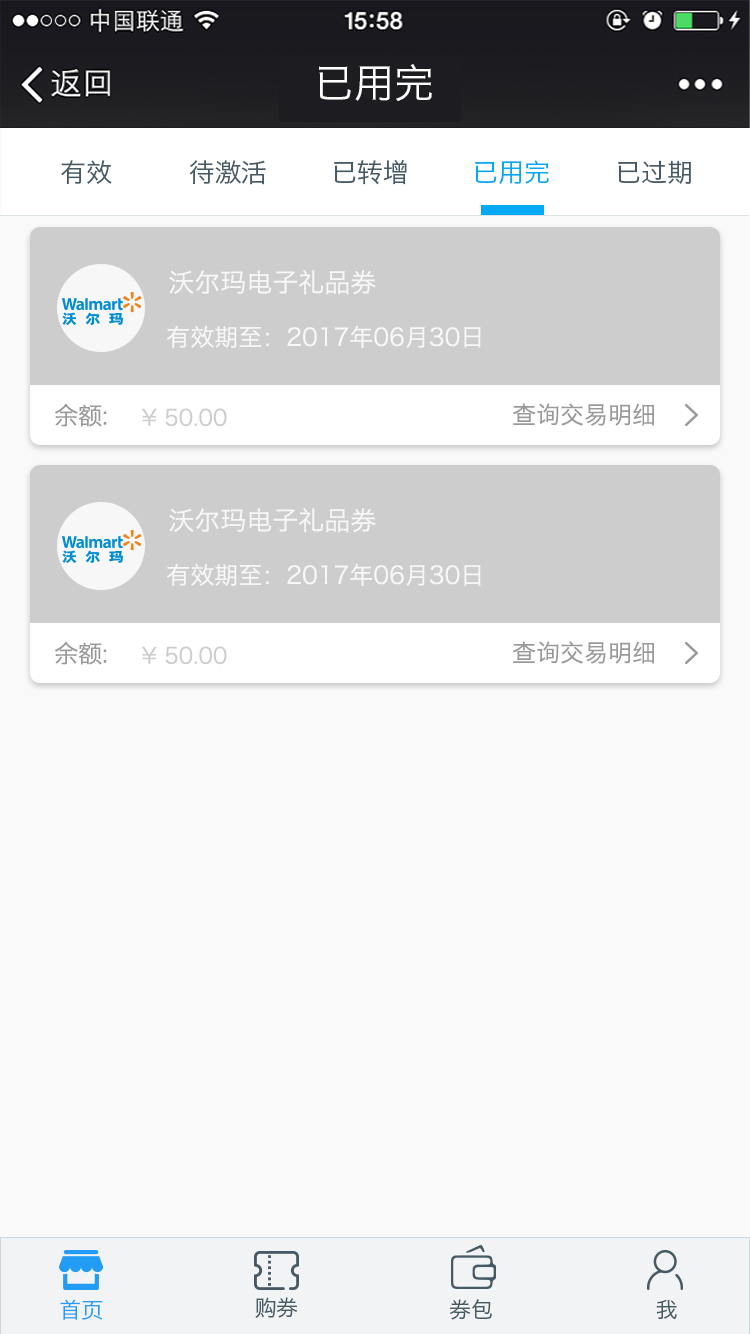
<style>
.page{position:relative;width:750px;height:1334px;background:#f9f9f9}
.page>*{position:absolute;margin:0}
.t1{font:40px "HiraginoSansGB-W3";color:#ffffff}
.t2{font:26px "HiraginoSansGB-W3";color:#455a64}
.t3{font:26px "HiraginoSansGB-W3";color:#03a9f4}
.t4{font:26px "HiraginoSansGB-W3";color:#f7f7f7}
.t5{font:24px "HiraginoSansGB-W3";color:#f7f7f7}
.t6{font:24px "HiraginoSansGB-W3";color:#999999}
.t7{font:22px "HiraginoSansGB-W3";color:#cdcdcd}
.t8{font:21.9px "HiraginoSansGB-W3";color:#229cf4}
.t9{font:22px "HiraginoSansGB-W3";color:#455a64}
.t10{font:22.1px "HiraginoSansGB-W3";color:#455a64}
</style>
<div class="page">
<p class="t1" style="left:319px;top:64px;width:113px;height:37px">已用完</p>
<p class="t2" style="left:61px;top:160px;width:51px;height:24px">有效</p>
<p class="t2" style="left:189px;top:160px;width:77px;height:25px">待激活</p>
<p class="t2" style="left:334px;top:160px;width:73px;height:25px">已转增</p>
<p class="t3" style="left:475px;top:160px;width:74px;height:24px">已用完</p>
<p class="t2" style="left:618px;top:160px;width:73px;height:24px">已过期</p>
<p class="t4" style="left:169px;top:270px;width:207px;height:25px">沃尔玛电子礼品券</p>
<p class="t5" style="left:167px;top:325px;width:314px;height:23px">有效期至：2017年06月30日</p>
<p class="t6" style="left:55px;top:403px;width:52px;height:24px">余额:</p>
<p class="t7" style="left:142px;top:408px;width:85px;height:19px">¥ 50.00</p>
<p class="t6" style="left:513px;top:403px;width:141px;height:23px">查询交易明细</p>
<p class="t4" style="left:169px;top:508px;width:207px;height:25px">沃尔玛电子礼品券</p>
<p class="t5" style="left:167px;top:563px;width:314px;height:23px">有效期至：2017年06月30日</p>
<p class="t6" style="left:55px;top:641px;width:52px;height:24px">余额:</p>
<p class="t6" style="left:513px;top:641px;width:141px;height:23px">查询交易明细</p>
<p class="t7" style="left:142px;top:646px;width:85px;height:19px">¥ 50.00</p>
<p class="t8" style="left:60px;top:1299px;width:43px;height:21px">首页</p>
<p class="t9" style="left:255px;top:1297px;width:43px;height:21px">购券</p>
<p class="t9" style="left:449px;top:1299px;width:43px;height:21px">券包</p>
<p class="t10" style="left:656px;top:1299px;width:21px;height:20px">我</p>
</div>
